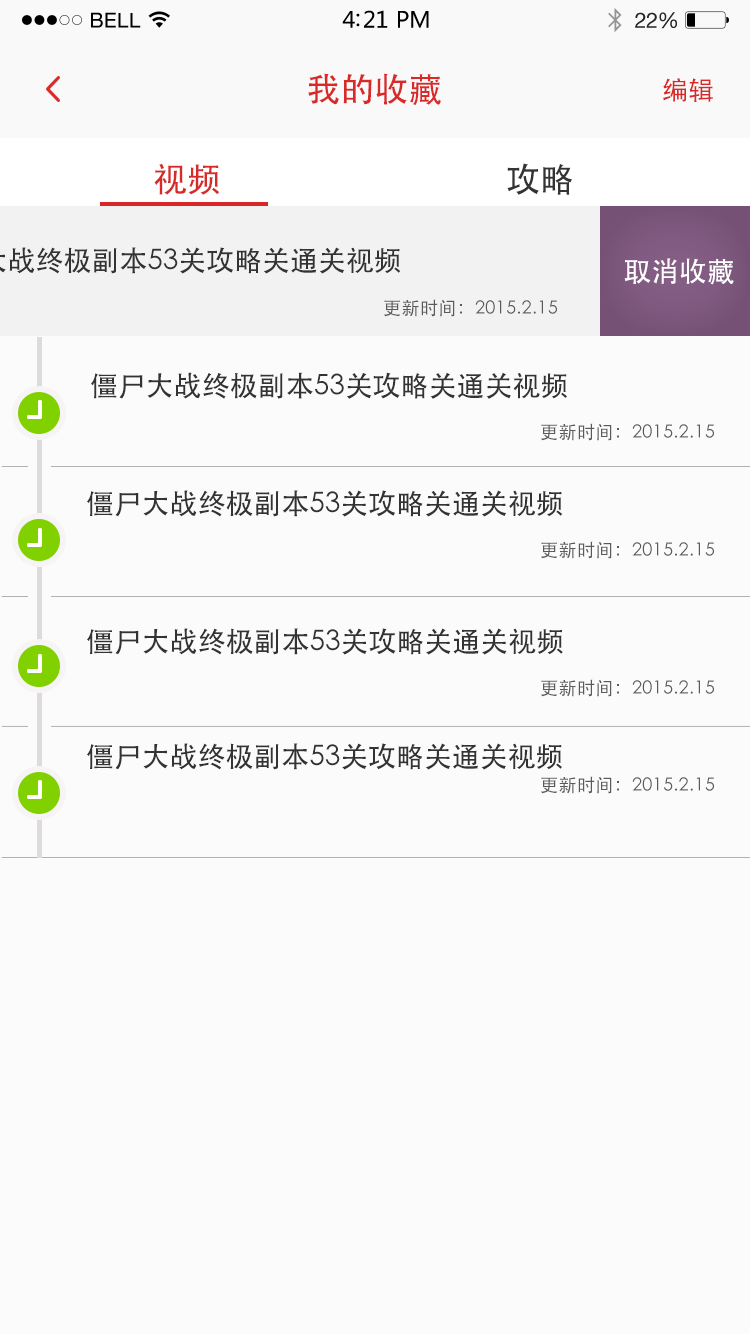
<style>
.page{position:relative;width:750px;height:1334px;background:#fbfbfb}
.page>*{position:absolute;margin:0}
.t1{font:34px "STHeiti";color:#d92a2a}
.t2{font:26px "STHeiti";color:#d92a2a}
.t3{font:34px "STHeiti";color:#343434}
.t4{font:28px "STHeiti";color:#ffffff}
.t5{font:18px "STHeiti";letter-spacing:0.02em;color:#5a5a5a}
.t6{font:28px "STHeiti";color:#333333}
.t7{font:18.1px "STHeiti";letter-spacing:0.02em;color:#5a5a5a}
</style>
<div class="page">
<p class="t1" style="left:308px;top:73px;width:133px;height:32px">我的收藏</p>
<p class="t2" style="left:663px;top:78px;width:50px;height:24px">编辑</p>
<p class="t1" style="left:154px;top:163px;width:66px;height:32px">视频</p>
<p class="t3" style="left:507px;top:163px;width:66px;height:32px">攻略</p>
<p class="t4" style="left:624px;top:258px;width:110px;height:27px">取消收藏</p>
<p class="t5" style="left:384px;top:299px;width:173px;height:18px">更新时间：2015.2.15</p>
<p class="t6" style="left:91px;top:372px;width:476px;height:27px">僵尸大战终极副本53关攻略关通关视频</p>
<p class="t5" style="left:541px;top:423px;width:173px;height:18px">更新时间：2015.2.15</p>
<p class="t6" style="left:87px;top:490px;width:476px;height:27px">僵尸大战终极副本53关攻略关通关视频</p>
<p class="t5" style="left:541px;top:541px;width:173px;height:18px">更新时间：2015.2.15</p>
<p class="t6" style="left:87px;top:628px;width:476px;height:27px">僵尸大战终极副本53关攻略关通关视频</p>
<p class="t5" style="left:541px;top:679px;width:173px;height:18px">更新时间：2015.2.15</p>
<p class="t6" style="left:87px;top:743px;width:475px;height:27px">僵尸大战终极副本53关攻略关通关视频</p>
<p class="t7" style="left:541px;top:776px;width:173px;height:18px">更新时间：2015.2.15</p>
</div>
